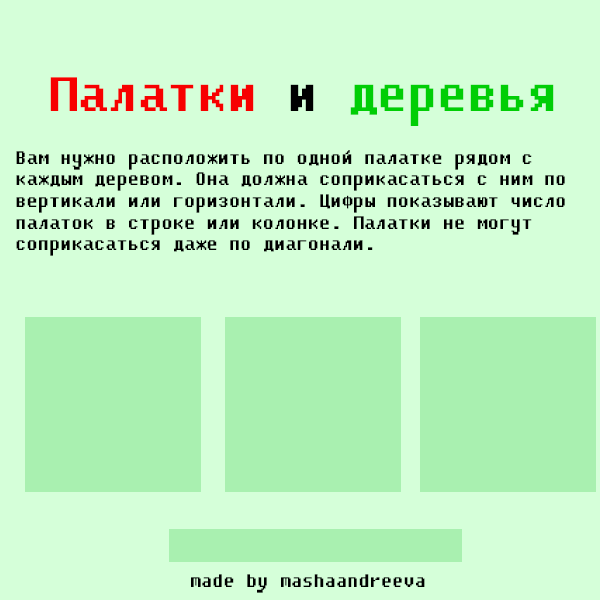
<style>
.page{position:relative;width:600px;height:600px;background:#d5ffd9}
.page>*{position:absolute;margin:0}
.t1{font:48px "Fixedsys";color:#f70000}
.t2{font:48px "Fixedsys";color:#000000}
.t3{font:48px "Fixedsys";color:#00ce05}
.t4{font:18px "Fixedsys";color:#000000}
</style>
<div class="page">
<p class="t1" style="left:50px;top:77px;width:504px;height:49px">Палатки<span class="t2"> и </span><span class="t3">деревья</span></p>
<p class="t4" style="left:16px;top:150px;width:549px;height:106px">Вам нужно расположить по одной палатке рядом с каждым деревом. Она должна соприкасаться с ним по вертикали или горизонтали. Цифры показывают число палаток в строке или колонке. Палатки не могут соприкасаться даже по диагонали.</p>
<p class="t4" style="left:191px;top:574px;width:234px;height:19px">made by mashaandreeva</p>
</div>
